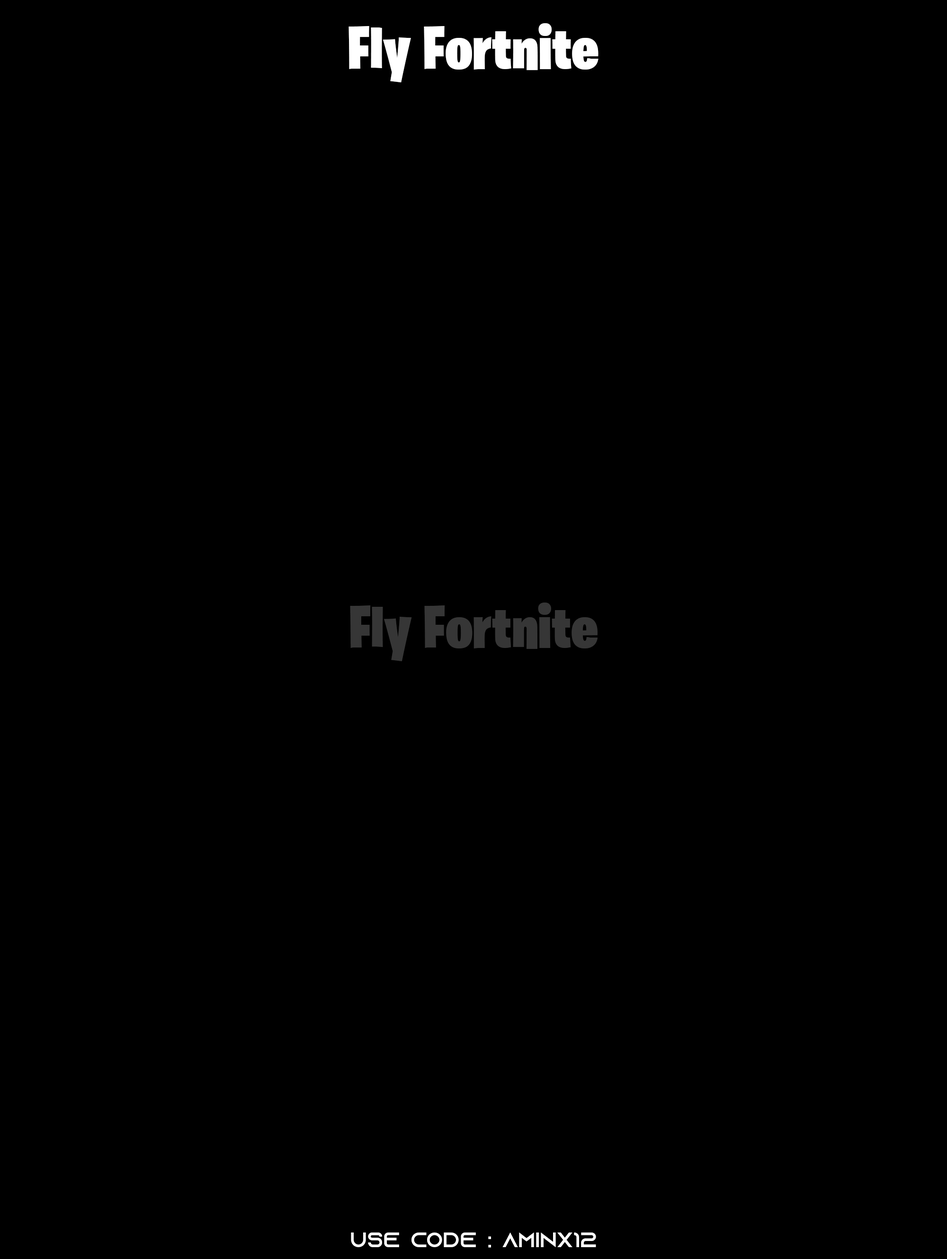
<style>
.page{position:relative;width:947px;height:1259px;background:#000000}
.page>*{position:absolute;margin:0}
.t1{font:61.5px "BurbankBigCondensed-Black";color:#ffffff}
.t2{font:61.1px "BurbankBigCondensed-Black";color:#363636}
.t3{font:21.3px "AzonixRegular";color:#ffffff}
</style>
<div class="page">
<p class="t1" style="left:348px;top:23px;width:250px;height:59px">Fly Fortnite</p>
<p class="t2" style="left:350px;top:603px;width:248px;height:58px">Fly Fortnite</p>
<p class="t3" style="left:351px;top:1233px;width:245px;height:15px">use code : Aminx12</p>
</div>
